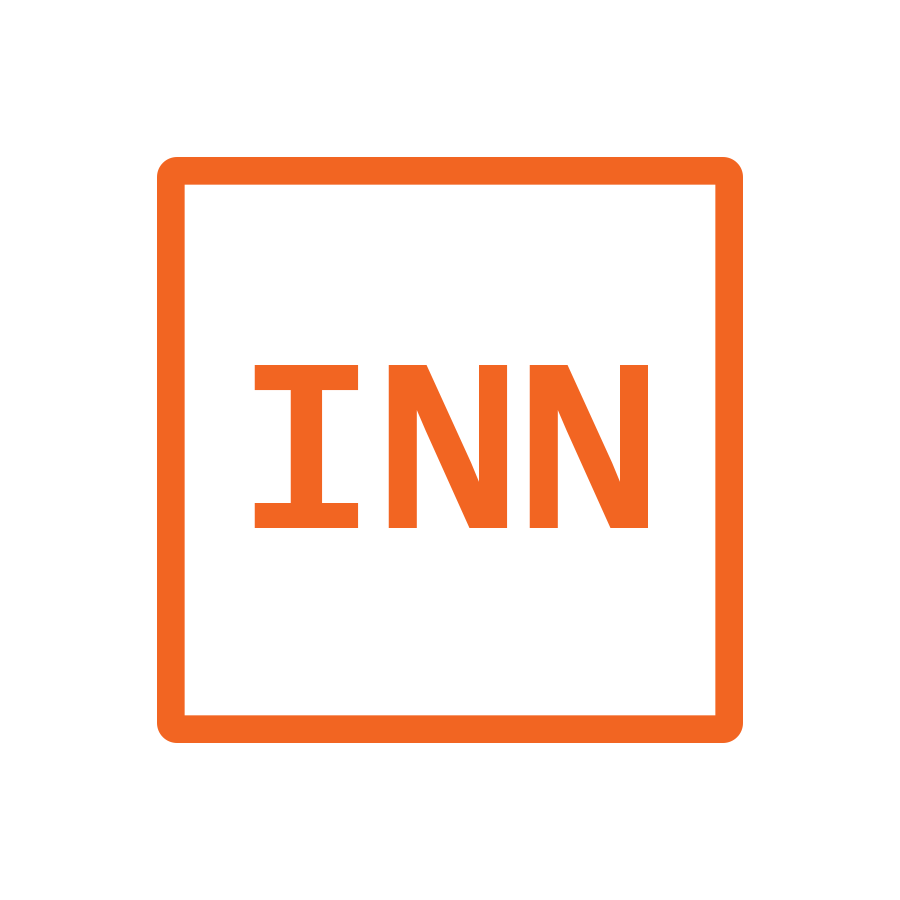
<style>
.page{position:relative;width:900px;height:900px;background:#ffffff}
.page>*{position:absolute;margin:0}
.t1{font:256.2px "Consolas-Bold";color:#f26522}
</style>
<div class="page">
<p class="t1" style="left:254px;top:365px;width:394px;height:163px">INN</p>
</div>
